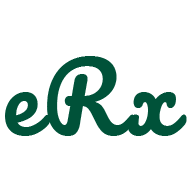
<style>
.page{position:relative;width:192px;height:192px;background:#ffffff}
.page>*{position:absolute;margin:0}
.t1{font:94.4px "Pacifico-Regular";letter-spacing:0.04em;color:#005239}
</style>
<div class="page">
<p class="t1" style="left:5px;top:56px;width:182px;height:80px">eRx</p>
</div>
